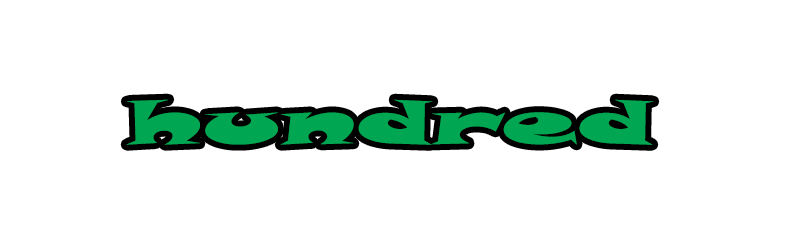
<style>
.page{position:relative;width:812px;height:249px;background:#ffffff}
.page>*{position:absolute;margin:0}
.t1{font:60px "SnapITC-Regular";color:#00a651;scale:2 1}
</style>
<div class="page">
<p class="t1" style="left:126px;top:99px;width:528px;height:46px">hundred</p>
</div>
